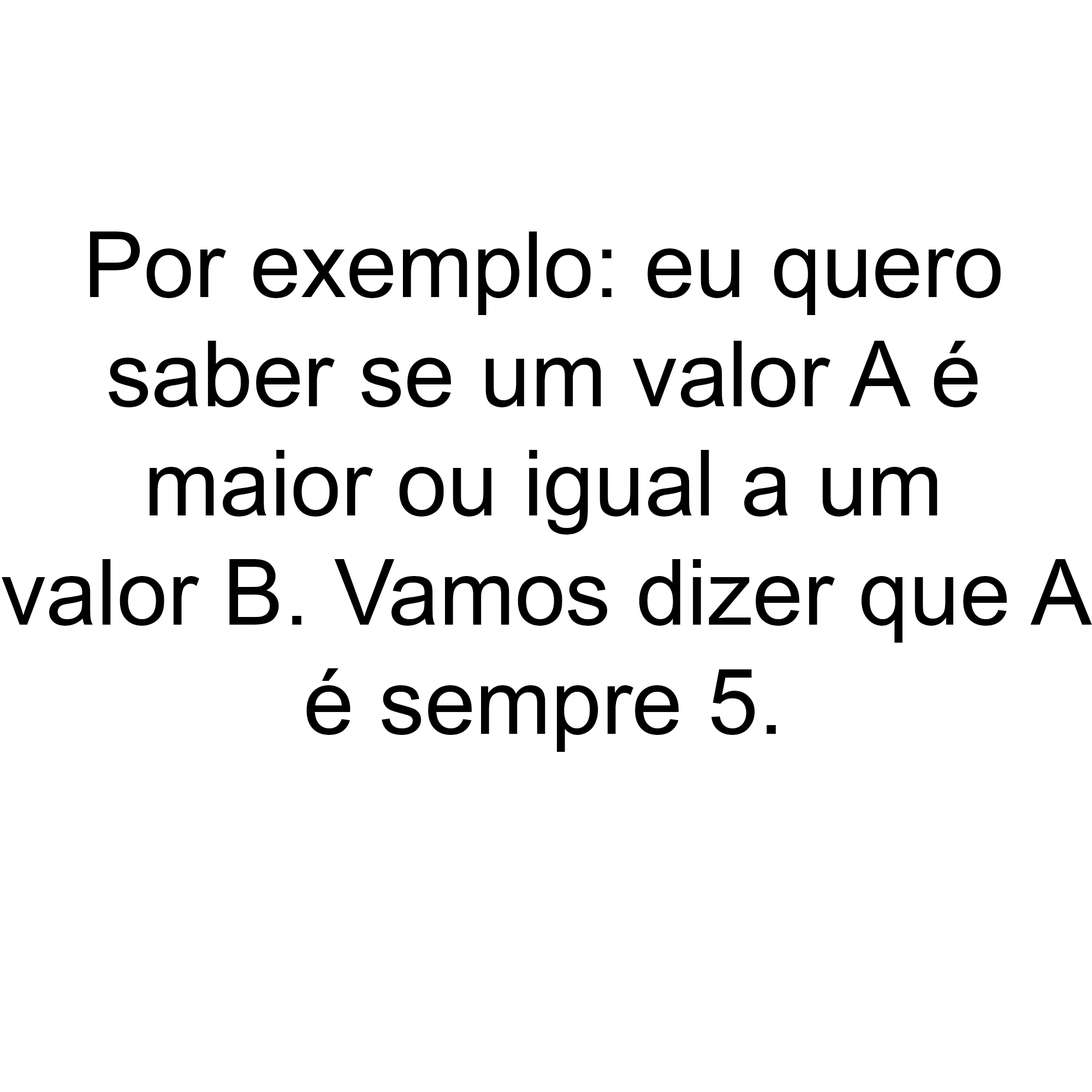
<style>
.page{position:relative;width:1092px;height:1092px;background:#ffffff}
.page>*{position:absolute;margin:0}
.t1{font:91px "ArialMT";color:#000000}
</style>
<div class="page">
<p class="t1" style="left:2px;top:232px;width:1090px;height:520px;text-align:center">Por exemplo: eu quero<br>saber se um valor A é<br>maior ou igual a um<br>valor B. Vamos dizer que A<br>é sempre 5.</p>
</div>
